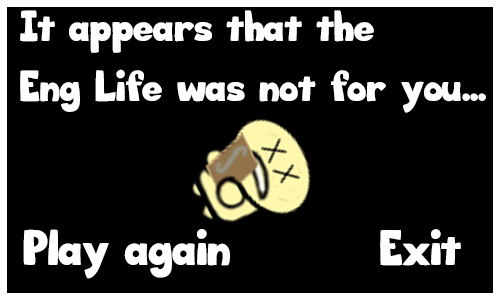
<style>
.page{position:relative;width:500px;height:300px;background:#000000}
.page>*{position:absolute;margin:0}
.t1{font:26px/60px "Big_Bottom_Cartoon";color:#ffffff}
.t2{font:30px "Big_Bottom_Cartoon";color:#ffffff}
.t3{font:29.8px "Big_Bottom_Cartoon";color:#ffffff}
</style>
<div class="page">
<p class="t1" style="left:20px;top:10px;width:466px;height:103px">It appears that the <br>Eng Life was not for you...</p>
<p class="t2" style="left:23px;top:229px;width:207px;height:50px">Play again</p>
<p class="t3" style="left:380px;top:229px;width:81px;height:37px">Exit</p>
</div>
